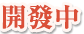
<style>
.page{position:relative;width:84px;height:34px;background:#fff6f2}
.page>*{position:absolute;margin:0}
.t1{font:26px "RyuminPro-ExBold";letter-spacing:0.02em;color:#da4e37;font-weight:bold}
</style>
<div class="page">
<p class="t1" style="left:2px;top:4px;width:77px;height:26px">開發中</p>
</div>
